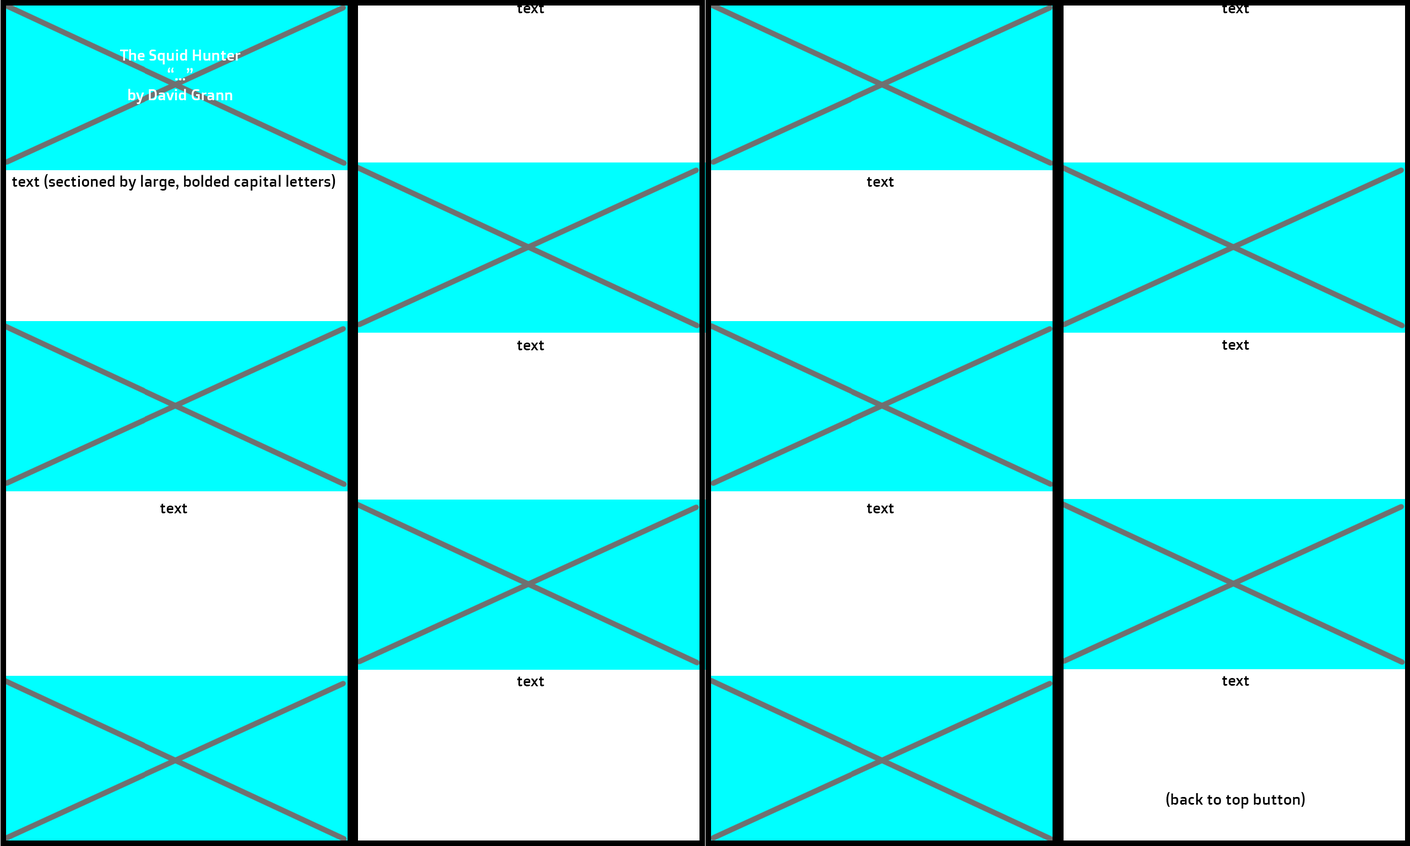
<style>
.page{position:relative;width:1410px;height:846px;background:#ffffff}
.page>*{position:absolute;margin:0}
.t1{font:15.5px "DoppioOne-Regular";color:#000000;scale:0.96 1}
.t2{font:15.5px/19.8px "DoppioOne-Regular";color:#ffffff;scale:0.96 1}
.t3{font:15.5px/19.8px "DoppioOne-Regular";color:#000000;scale:0.96 1}
</style>
<div class="page">
<p class="t1" style="left:517px;top:3px;width:27px;height:10px">text</p>
<p class="t1" style="left:1222px;top:3px;width:27px;height:10px">text</p>
<p class="t2" style="left:120px;top:49px;width:121px;height:55px;text-align:center">The Squid Hunter<br>“...”<br>by David Grann</p>
<p class="t1" style="left:12px;top:174px;width:323px;height:17px">text (sectioned by large, bolded capital letters)</p>
<p class="t1" style="left:867px;top:177px;width:27px;height:10px">text</p>
<p class="t1" style="left:517px;top:340px;width:27px;height:10px">text</p>
<p class="t1" style="left:1222px;top:340px;width:27px;height:10px">text</p>
<p class="t1" style="left:160px;top:503px;width:27px;height:10px">text</p>
<p class="t1" style="left:867px;top:503px;width:27px;height:10px">text</p>
<p class="t1" style="left:517px;top:676px;width:27px;height:10px">text</p>
<p class="t3" style="left:1166px;top:676px;width:139px;height:132px;text-align:center">text<br><br><br><br><br><br>(back to top button)</p>
</div>
